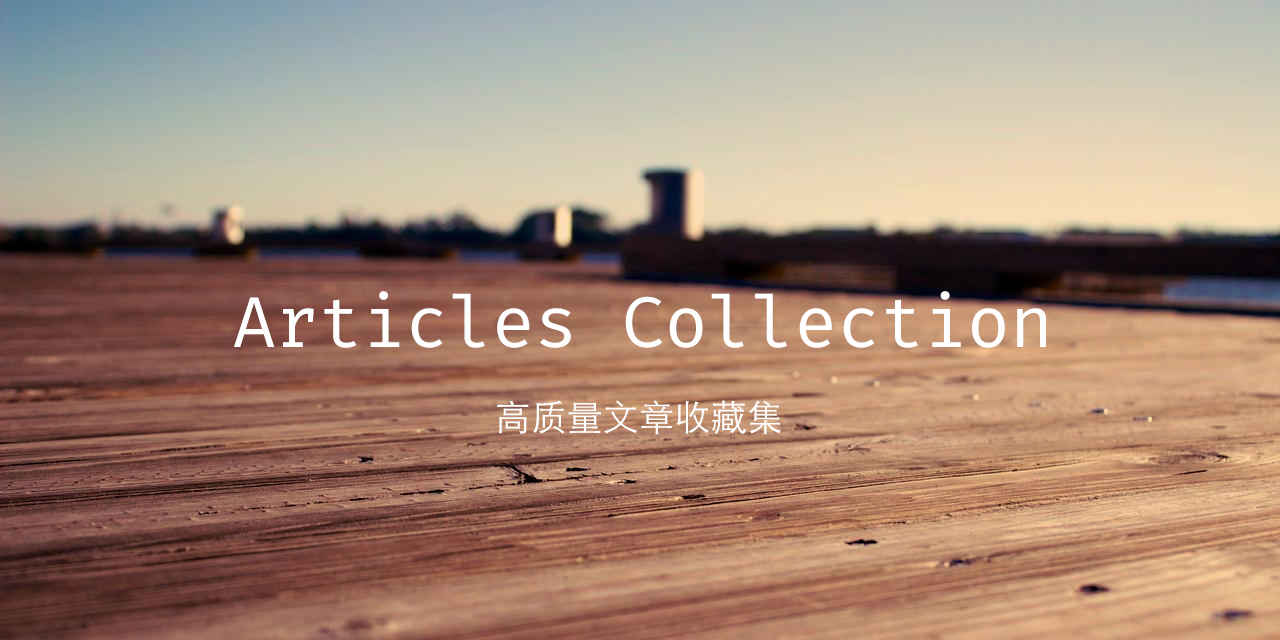
<style>
.page{position:relative;width:1280px;height:640px}
.page>*{position:absolute;margin:0}
.t1{font:72px "FiraCode-Regular";color:#ffffff}
.t2{font:36px "STHeitiSC-Light";color:#ffffff}
</style>
<div class="page">
<p class="t1" style="left:234px;top:291px;width:812px;height:57px">Articles Collection</p>
<p class="t2" style="left:497px;top:400px;width:285px;height:35px">高质量文章收藏集</p>
</div>
